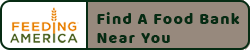
<style>
.page{position:relative;width:250px;height:50px;background:#97897d}
.page>*{position:absolute;margin:0}
.t1{font:16px "Baloo-Regular";letter-spacing:0.08em;color:#062b13}
</style>
<div class="page">
<p class="t1" style="left:97px;top:12px;width:143px;height:31px">Find A Food Bank<br>Near You</p>
</div>
